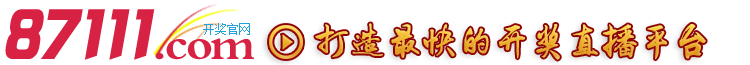
<style>
.page{position:relative;width:750px;height:65px;background:#ffffff}
.page>*{position:absolute;margin:0}
.t1{font:74px "JLinXin";color:#d82244;font-style:italic}
.t2{font:12px "SimSun";color:#20a2dc}
.t3{font:36px "Li-Xuke"}
.t4{font:48px "Ò¶¸ùÓÑÃ«±ÊÐÐÊé";letter-spacing:-0.05em;color:#d82244}
</style>
<div class="page">
<p class="t1" style="left:5px;top:9px;width:150px;height:51px">87111</p>
<p class="t2" style="left:203px;top:23px;width:47px;height:12px">开奖官网</p>
<p class="t3" style="left:315px;top:23px;width:391px;height:37px">打造最快的开奖直播平台</p>
<p class="t4" style="left:155px;top:38px;width:99px;height:22px">.com</p>
</div>
